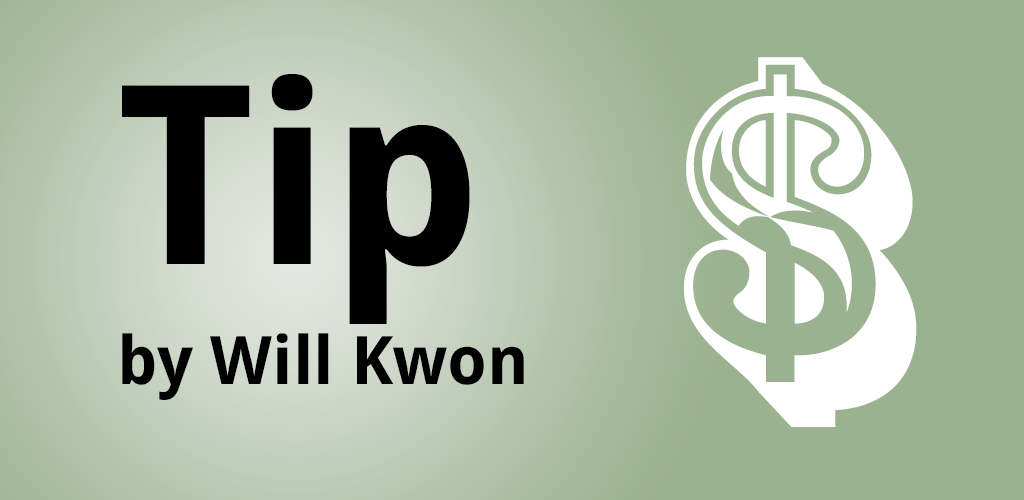
<style>
.page{position:relative;width:1024px;height:500px;background:#9bb290}
.page>*{position:absolute;margin:0}
.t1{font:444.4px "RosewoodStd-Regular";color:#ffffff}
.t2{font:250px "DroidSans-Bold";color:#010101}
.t3{font:66.7px "DroidSans-Bold";color:#000000}
</style>
<div class="page">
<p class="t1" style="left:684px;top:57px;width:233px;height:370px">$</p>
<p class="t2" style="left:122px;top:74px;width:348px;height:250px">Tip</p>
<p class="t3" style="left:122px;top:333px;width:402px;height:67px">by Will Kwon</p>
</div>
